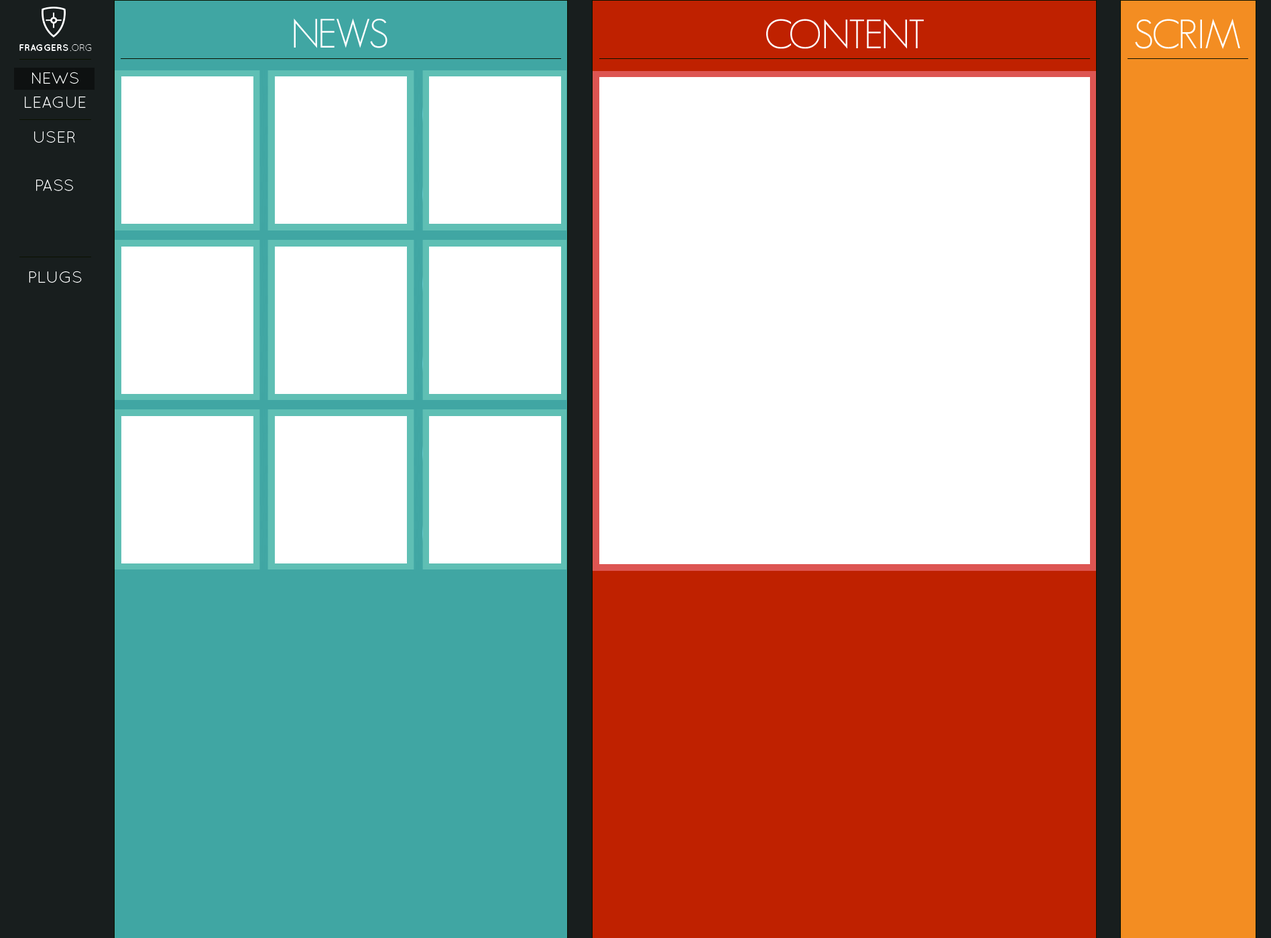
<style>
.page{position:relative;width:1271px;height:938px;background:#ffffff}
.page>*{position:absolute;margin:0}
.t1{font:40.2px "GeosansLight";color:#ffffff}
.t2{font:16.1px/24.1px "QuicksandBook-Regular";color:#ffffff}
.t3{font:16.1px "QuicksandBook-Regular";color:#ffffff}
</style>
<div class="page">
<p class="t1" style="left:294px;top:18px;width:93px;height:30px">NEWS</p>
<p class="t1" style="left:766px;top:19px;width:158px;height:30px">CONTENT</p>
<p class="t1" style="left:1135px;top:19px;width:105px;height:30px">SCRIM</p>
<p class="t2" style="left:25px;top:72px;width:61px;height:36px;text-align:center">NEWS<br>LEAGUE</p>
<p class="t2" style="left:34px;top:131px;width:41px;height:60px;text-align:center">USER<br><br>PASS</p>
<p class="t3" style="left:29px;top:271px;width:53px;height:12px">PLUGS</p>
</div>
